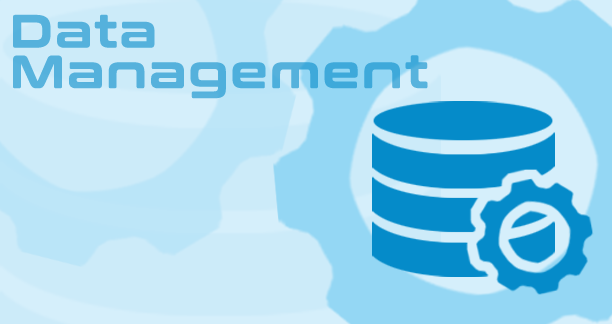
<style>
.page{position:relative;width:612px;height:324px;background:#ccebf9}
.page>*{position:absolute;margin:0}
.t1{font:44.9px/40.6px "ConthraxSb-Regular";letter-spacing:0.05em;color:#55b1dc;font-weight:bold}
</style>
<div class="page">
<p class="t1" style="left:13px;top:14px;width:415px;height:85px">Data<br>Management</p>
</div>
